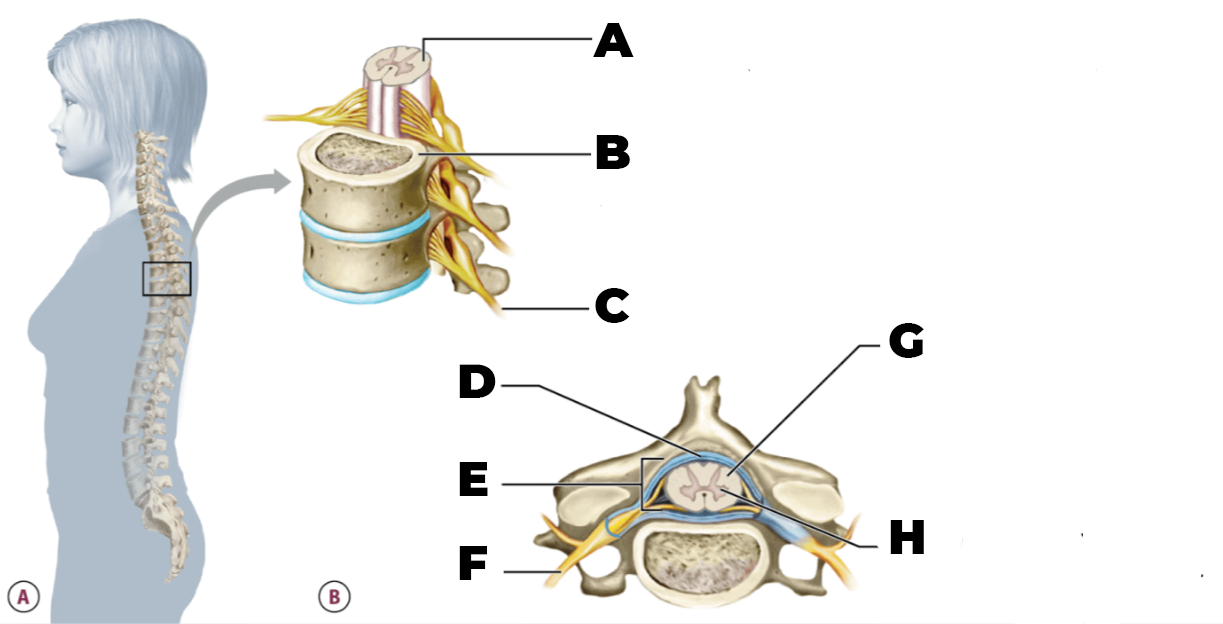
<style>
.page{position:relative;width:1223px;height:624px;background:#ffffff}
.page>*{position:absolute;margin:0}
.t1{font:48px/14px "Montserrat-Black";color:#000000}
</style>
<div class="page">
<p class="t1" style="left:593px;top:23px;width:41px;height:300px">A<br><br><br><br><br><br><br><br>B<br><br><br><br><br><br><br><br><br><br><br>C</p>
<p class="t1" style="left:889px;top:323px;width:35px;height:231px">G<br><br><br><br><br><br><br><br><br><br><br><br><br><br>H</p>
<p class="t1" style="left:459px;top:364px;width:37px;height:216px">D<br><br><br><br><br><br><br>E<br><br><br><br><br><br>F</p>
</div>
